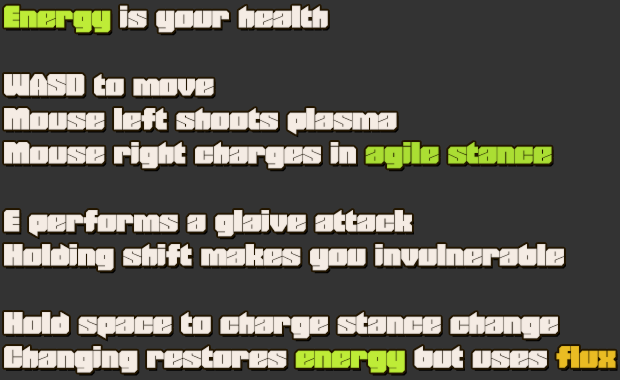
<style>
.page{position:relative;width:620px;height:380px;background:#333333}
.page>*{position:absolute;margin:0}
.t1{font:32px/34px "PowerChord";color:#f5ece4}
</style>
<div class="page">
<p class="t1" style="left:4px;top:5px;width:612px;height:368px">Energy is your health<br><br>WASD to move<br>Mouse left shoots plasma<br>Mouse right charges in agile stance<br><br>E performs a glaive attack<br>Holding shift makes you invulnerable<br><br>Hold space to charge stance change<br>Changing restores energy but uses flux</p>
</div>
